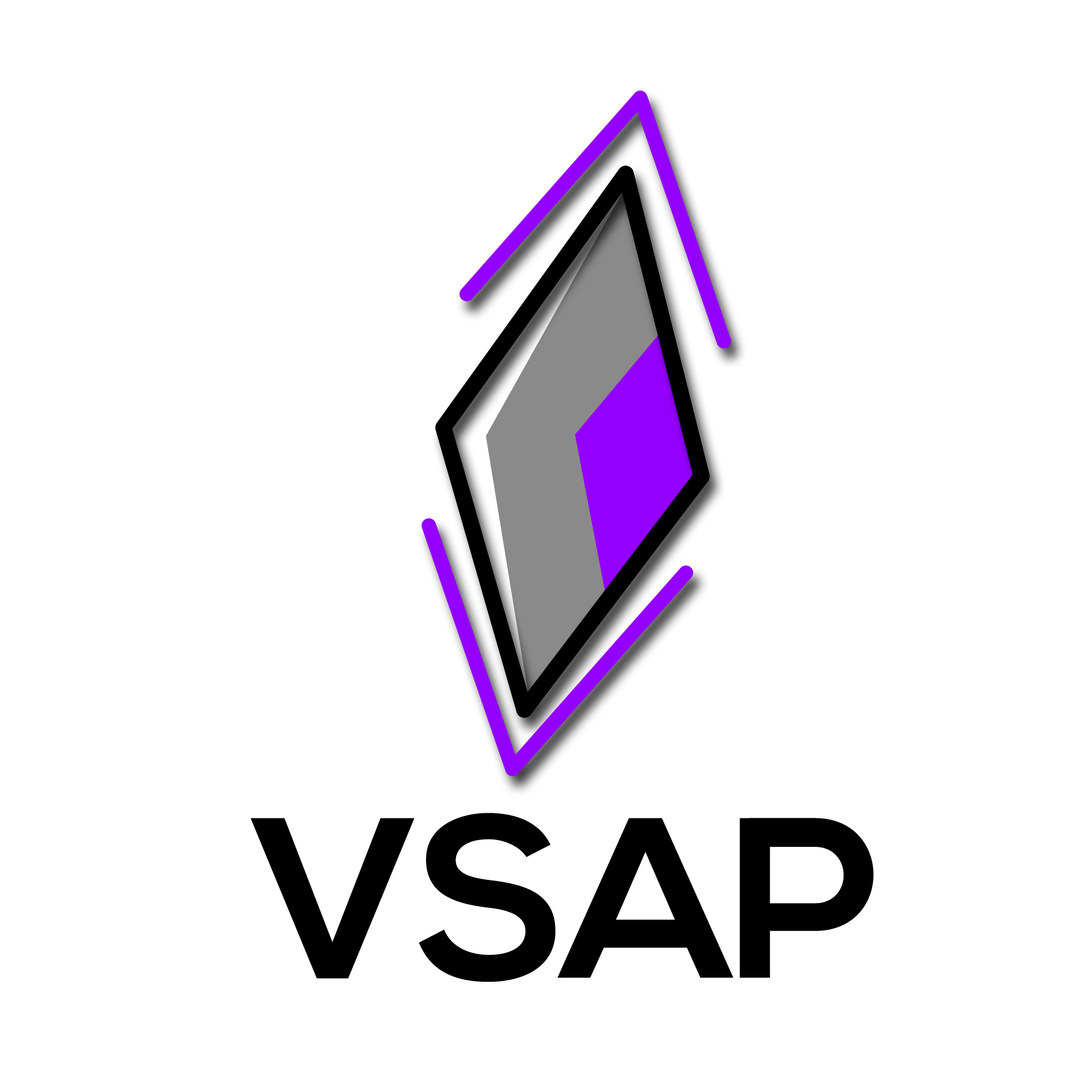
<style>
.page{position:relative;width:1092px;height:1092px;background:#ffffff}
.page>*{position:absolute;margin:0}
.t1{font:227.5px "NexaBold";letter-spacing:-0.02em;color:#000000}
</style>
<div class="page">
<p class="t1" style="left:250px;top:813px;width:624px;height:169px">VSAP</p>
</div>
